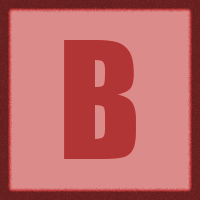
<style>
.page{position:relative;width:200px;height:200px;background:#dc8b8b}
.page>*{position:absolute;margin:0}
.t1{font:150px "Impact";color:#b13535}
</style>
<div class="page">
<p class="t1" style="left:64px;top:40px;width:72px;height:119px">B</p>
</div>
